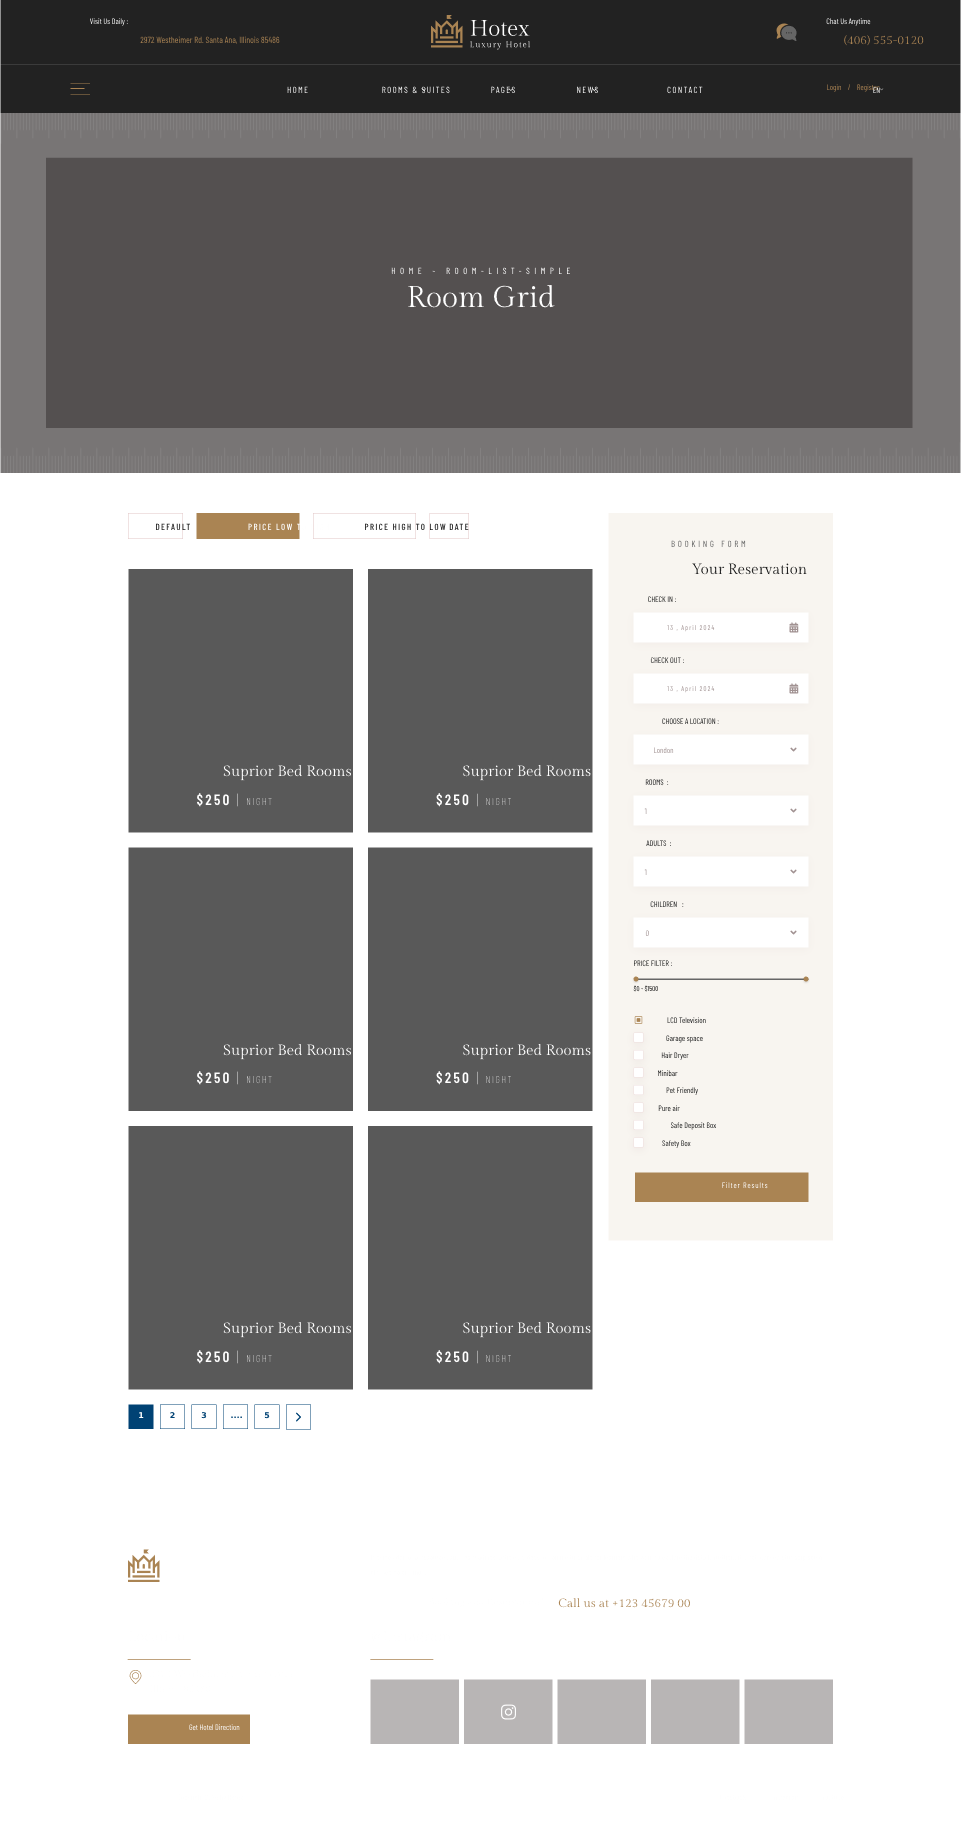
<style>
.page{position:relative;width:961px;height:1825px;background:#ffffff}
.page>*{position:absolute;margin:0}
.t1{font:8px "BarlowCondensed-Regular"}
.t2{font:9px "BarlowCondensed-Regular";color:#aa8453}
.t3{font:12px "GildaDisplay-Regular";color:#aa8453}
.t4{font:9px "BarlowCondensed-Regular";letter-spacing:0.15em;text-transform:uppercase}
.t5{font:9px "BarlowCondensed-Regular";letter-spacing:0.5em;text-transform:uppercase}
.t6{font:30px "GildaDisplay-Regular";color:#ffffff}
.t7{font:9px "BarlowCondensed-Medium";letter-spacing:0.15em;text-transform:uppercase}
.t8{font:9px "BarlowCondensed-Medium";letter-spacing:0.15em;color:#ffffff;text-transform:uppercase}
.t9{font:9px "BarlowCondensed-Medium";letter-spacing:0.15em;color:#222222;text-transform:uppercase}
.t10{font:9px "BarlowCondensed-Regular";letter-spacing:0.3em;text-transform:uppercase}
.t11{font:15px "GildaDisplay-Regular";color:#222222}
.t12{font:8px "BarlowCondensed-Regular";text-transform:uppercase}
.t13{font:7px "BarlowCondensed-Regular";letter-spacing:0.15em}
.t14{font:15px "GildaDisplay-Regular";color:#ffffff}
.t15{font:10px "BarlowCondensed-Thin";letter-spacing:0.15em;color:#ffffff;text-transform:uppercase}
.t16{font:15px "BarlowCondensed-SemiBold";letter-spacing:0.15em;color:#ffffff;text-transform:uppercase}
.t17{font:15px "BarlowCondensed-Thin";letter-spacing:0.15em;color:#ffffff;text-transform:uppercase}
.t18{font:7px "BarlowCondensed-Regular";text-transform:uppercase}
.t19{font:8px "BarlowCondensed-Regular";letter-spacing:0.1em;color:#ffffff}
.t20{font:8px "RobotoRoman-Bold";color:#ffffff}
.t21{font:8px "RobotoRoman-Bold";color:#004274}
.t22{font:8px "RobotoRoman-Bold"}
</style>
<div class="page">
<p class="t1" style="left:90px;top:18px;width:38px;height:8px">Visit Us Daily :</p>
<p class="t1" style="left:826px;top:18px;width:45px;height:8px">Chat Us Anytime</p>
<p class="t2" style="left:140px;top:36px;width:140px;height:8px">2972 Westheimer Rd. Santa Ana, Illinois 85486</p>
<p class="t3" style="left:844px;top:35px;width:80px;height:11px">(406) 555-0120</p>
<p class="t4" style="left:287px;top:86px;width:21px;height:8px">Home</p>
<p class="t4" style="left:382px;top:86px;width:68px;height:8px">Rooms &amp; Suites</p>
<p class="t4" style="left:491px;top:86px;width:24px;height:8px">Pages</p>
<p class="t4" style="left:577px;top:86px;width:21px;height:8px">News</p>
<p class="t4" style="left:667px;top:86px;width:36px;height:8px">Contact</p>
<p class="t1" style="left:827px;top:84px;width:53px;height:8px">Login    /    Register</p>
<p class="t1" style="left:873px;top:87px;width:7px;height:6px">EN</p>
<p class="t5" style="left:391px;top:267px;width:179px;height:8px">Home - room-list-simple</p>
<p class="t6" style="left:408px;top:284px;width:147px;height:24px">Room Grid</p>
<p class="t7" style="left:156px;top:523px;width:34px;height:8px">Default</p>
<p class="t8" style="left:248px;top:523px;width:81px;height:8px">Price Low to High</p>
<p class="t9" style="left:365px;top:523px;width:81px;height:8px">Price High to Low</p>
<p class="t9" style="left:449px;top:523px;width:20px;height:7px">Date</p>
<p class="t10" style="left:671px;top:540px;width:75px;height:8px">Booking Form</p>
<p class="t11" style="left:691px;top:563px;width:116px;height:12px">Your Reservation</p>
<p class="t12" style="left:648px;top:596px;width:28px;height:7px">Check in :</p>
<p class="t13" style="left:667px;top:625px;width:48px;height:7px">13 , April 2024</p>
<p class="t12" style="left:650px;top:657px;width:34px;height:7px">Check Out :</p>
<p class="t13" style="left:667px;top:686px;width:48px;height:7px">13 , April 2024</p>
<p class="t12" style="left:662px;top:718px;width:57px;height:7px">Choose a location :</p>
<p class="t1" style="left:654px;top:747px;width:20px;height:7px">London</p>
<p class="t14" style="left:223px;top:764px;width:129px;height:17px">Suprior Bed Rooms</p>
<p class="t14" style="left:463px;top:764px;width:128px;height:17px">Suprior Bed Rooms</p>
<p class="t12" style="left:645px;top:779px;width:24px;height:7px">Rooms  :</p>
<p class="t15" style="left:196px;top:793px;width:76px;height:14px"><span class="t16">$250 </span><span class="t17">| </span>Night</p>
<p class="t15" style="left:436px;top:793px;width:76px;height:14px"><span class="t16">$250 </span><span class="t17">| </span>Night</p>
<p class="t1" style="left:644px;top:808px;width:3px;height:6px">1</p>
<p class="t12" style="left:646px;top:840px;width:25px;height:7px">adults  :</p>
<p class="t1" style="left:644px;top:869px;width:3px;height:6px">1</p>
<p class="t12" style="left:650px;top:901px;width:34px;height:7px">Children   :</p>
<p class="t1" style="left:645px;top:930px;width:4px;height:7px">0</p>
<p class="t12" style="left:634px;top:960px;width:38px;height:7px">Price filter :</p>
<p class="t18" style="left:633px;top:985px;width:25px;height:7px">$0 - $1500</p>
<p class="t1" style="left:667px;top:1017px;width:39px;height:7px">LCD Television</p>
<p class="t1" style="left:666px;top:1035px;width:37px;height:8px">Garage space</p>
<p class="t14" style="left:223px;top:1043px;width:129px;height:17px">Suprior Bed Rooms</p>
<p class="t14" style="left:463px;top:1043px;width:128px;height:17px">Suprior Bed Rooms</p>
<p class="t1" style="left:661px;top:1052px;width:28px;height:8px">Hair Dryer</p>
<p class="t15" style="left:196px;top:1071px;width:76px;height:14px"><span class="t16">$250 </span><span class="t17">| </span>Night</p>
<p class="t15" style="left:436px;top:1071px;width:76px;height:14px"><span class="t16">$250 </span><span class="t17">| </span>Night</p>
<p class="t1" style="left:658px;top:1070px;width:20px;height:7px">Minibar</p>
<p class="t1" style="left:666px;top:1087px;width:32px;height:8px">Pet Friendly</p>
<p class="t1" style="left:658px;top:1105px;width:22px;height:7px">Pure air</p>
<p class="t1" style="left:670px;top:1122px;width:47px;height:8px">Safe Deposit Box</p>
<p class="t1" style="left:662px;top:1140px;width:29px;height:8px">Safety Box</p>
<p class="t19" style="left:722px;top:1182px;width:46px;height:7px">Filter Results</p>
<p class="t14" style="left:223px;top:1321px;width:129px;height:17px">Suprior Bed Rooms</p>
<p class="t14" style="left:463px;top:1321px;width:128px;height:17px">Suprior Bed Rooms</p>
<p class="t15" style="left:196px;top:1350px;width:76px;height:14px"><span class="t16">$250 </span><span class="t17">| </span>Night</p>
<p class="t15" style="left:436px;top:1350px;width:76px;height:14px"><span class="t16">$250 </span><span class="t17">| </span>Night</p>
<p class="t20" style="left:139px;top:1412px;width:5px;height:6px">1</p>
<p class="t21" style="left:170px;top:1412px;width:5px;height:6px">2</p>
<p class="t21" style="left:201px;top:1412px;width:6px;height:7px">3</p>
<p class="t22" style="left:231px;top:1416px;width:11px;height:2px">....</p>
<p class="t21" style="left:264px;top:1412px;width:6px;height:7px">5</p>
<p class="t3" style="left:558px;top:1598px;width:132px;height:10px">Call us at +123 45679 00</p>
<p class="t1" style="left:189px;top:1724px;width:51px;height:7px">Get Hotel Direction</p>
</div>
